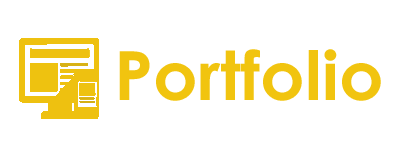
<style>
.page{position:relative;width:400px;height:150px;background:#ffffff}
.page>*{position:absolute;margin:0}
.t1{font:67.9px "CenturyGothic-Bold";color:#f1c40f}
</style>
<div class="page">
<p class="t1" style="left:119px;top:49px;width:262px;height:52px">Portfolio</p>
</div>
